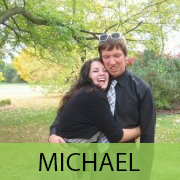
<style>
.page{position:relative;width:180px;height:180px}
.page>*{position:absolute;margin:0}
.t1{font:26.7px "MyriadPro-Regular";color:#030303}
</style>
<div class="page">
<p class="t1" style="left:39px;top:153px;width:101px;height:18px">MICHAEL</p>
</div>
